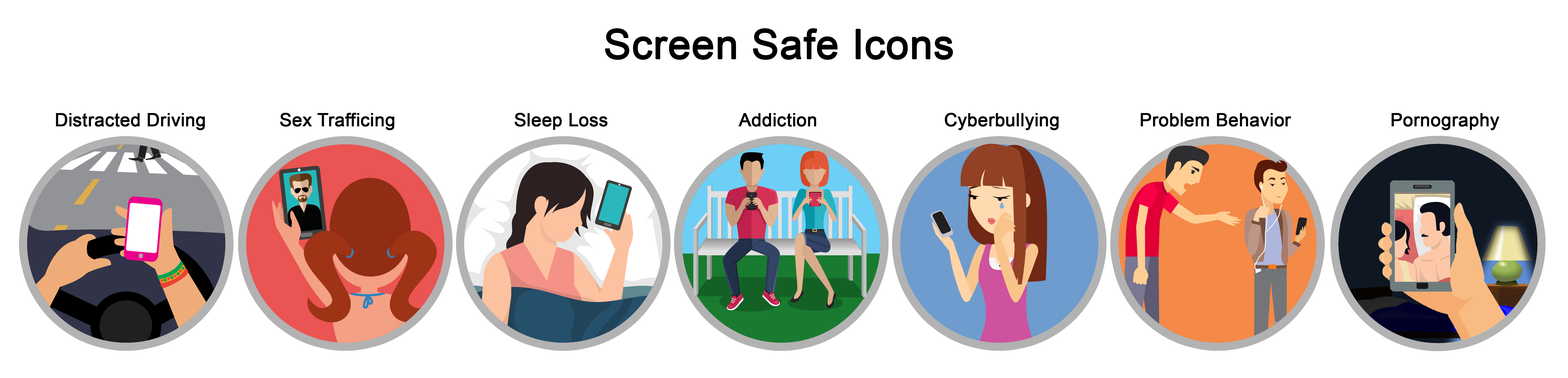
<style>
.page{position:relative;width:1568px;height:378px;background:#ffffff}
.page>*{position:absolute;margin:0}
.t1{font:40.7px "ArialMT";color:#000000;font-weight:bold}
.t2{font:18.1px "ArialMT";color:#000000;font-weight:bold}
</style>
<div class="page">
<p class="t1" style="left:605px;top:28px;width:348px;height:32px">Screen Safe Icons</p>
<p class="t2" style="left:56px;top:113px;width:1443px;height:17px">Distracted Driving          Sex Trafficing             Sleep Loss               Addiction              Cyberbullying         Problem Behavior                  Pornography</p>
</div>
